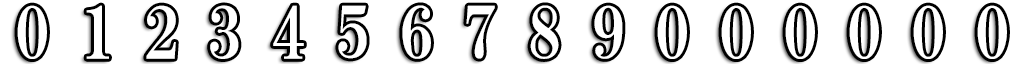
<style>
.page{position:relative;width:1024px;height:64px;background:#ffffff}
.page>*{position:absolute;margin:0}
.t1{font:72px "HGSMinchoE";color:#ffffff}
</style>
<div class="page">
<p class="t1" style="left:17px;top:5px;width:30px;height:54px">0</p>
<p class="t1" style="left:86px;top:5px;width:23px;height:54px">1</p>
<p class="t1" style="left:146px;top:5px;width:30px;height:54px">2</p>
<p class="t1" style="left:210px;top:5px;width:29px;height:54px">3</p>
<p class="t1" style="left:273px;top:5px;width:31px;height:54px">4</p>
<p class="t1" style="left:338px;top:5px;width:29px;height:54px">5</p>
<p class="t1" style="left:402px;top:5px;width:29px;height:54px">6</p>
<p class="t1" style="left:466px;top:5px;width:29px;height:54px">7</p>
<p class="t1" style="left:530px;top:5px;width:29px;height:54px">8</p>
<p class="t1" style="left:594px;top:5px;width:29px;height:54px">9</p>
<p class="t1" style="left:657px;top:5px;width:30px;height:54px">0</p>
<p class="t1" style="left:721px;top:5px;width:30px;height:54px">0</p>
<p class="t1" style="left:785px;top:5px;width:30px;height:54px">0</p>
<p class="t1" style="left:849px;top:5px;width:30px;height:54px">0</p>
<p class="t1" style="left:913px;top:5px;width:30px;height:54px">0</p>
<p class="t1" style="left:977px;top:5px;width:30px;height:54px">0</p>
</div>
